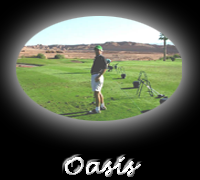
<style>
.page{position:relative;width:200px;height:180px}
.page>*{position:absolute;margin:0}
.t1{font:22.3px "LucidaHandwriting-Italic";font-weight:bold}
</style>
<div class="page">
<p class="t1" style="left:65px;top:157px;width:76px;height:20px">Oasis</p>
</div>
